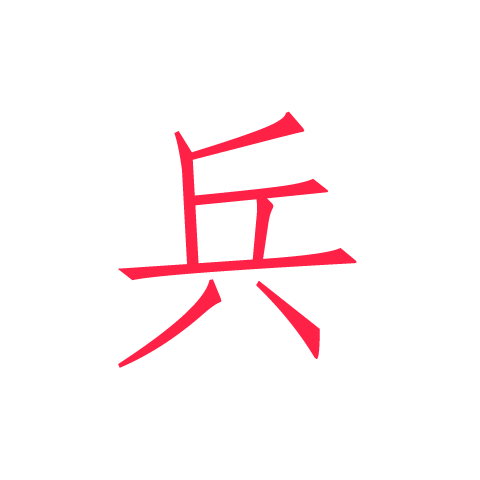
<style>
.page{position:relative;width:480px;height:480px;background:#ffffff}
.page>*{position:absolute;margin:0}
.t1{font:288px "STFangsong";color:#ff2146}
</style>
<div class="page">
<p class="t1" style="left:118px;top:111px;width:239px;height:257px">兵</p>
</div>
